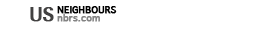
<style>
.page{position:relative;width:265px;height:36px;background:#ffffff}
.page>*{position:absolute;margin:0}
.t1{font:9.2px "Thonburi-Bold";color:#000000;font-weight:bold}
.t2{font:18.4px "Thonburi-Bold";color:#424141;font-weight:bold}
.t3{font:9.2px "Thonburi-Bold";color:#838383;font-weight:bold}
</style>
<div class="page">
<p class="t1" style="left:57px;top:6px;width:60px;height:8px">NEIGHBOURS</p>
<p class="t2" style="left:30px;top:7px;width:24px;height:15px">US</p>
<p class="t3" style="left:57px;top:14px;width:43px;height:8px">nbrs.com</p>
</div>
